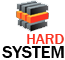
<style>
.page{position:relative;width:65px;height:60px;background:#ffffff}
.page>*{position:absolute;margin:0}
.t1{font:15px "FranklinGothic-Medium";color:#fa3323}
.t2{font:18px "FranklinGothic-Medium";color:#000000}
</style>
<div class="page">
<p class="t1" style="left:27px;top:34px;width:37px;height:10px">HARD</p>
<p class="t2" style="left:2px;top:46px;width:62px;height:12px">SYSTEM</p>
</div>
